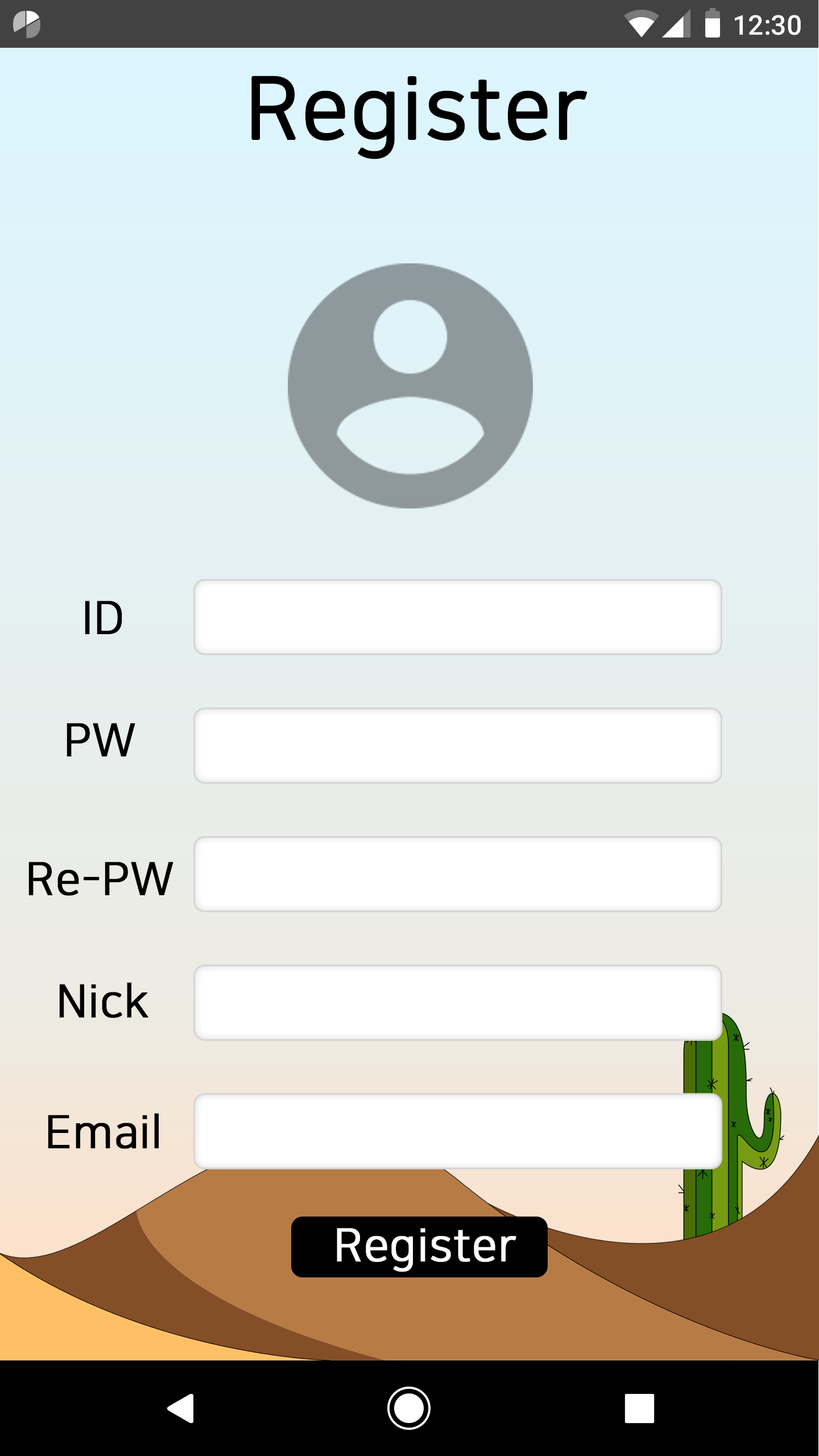
<style>
.page{position:relative;width:819px;height:1456px}
.page>*{position:absolute;margin:0}
.t1{font:27.3px "Roboto-Medium";color:#ffffff}
.t2{font:85.3px "NanumSquareOTFR";color:#000000;font-weight:bold}
.t3{font:45.5px "NanumSquareOTFR";color:#000000;font-weight:bold}
.t4{font:45.5px "NanumSquareOTFR";color:#ffffff;font-weight:bold}
</style>
<div class="page">
<p class="t1" style="left:735px;top:15px;width:66px;height:20px">12:30</p>
<p class="t2" style="left:251px;top:76px;width:337px;height:83px">Register</p>
<p class="t3" style="left:85px;top:601px;width:37px;height:33px">ID</p>
<p class="t3" style="left:67px;top:723px;width:68px;height:33px">PW</p>
<p class="t3" style="left:28px;top:862px;width:145px;height:34px">Re-PW</p>
<p class="t3" style="left:59px;top:982px;width:89px;height:36px">Nick</p>
<p class="t3" style="left:48px;top:1113px;width:111px;height:36px">Email</p>
<p class="t4" style="left:337px;top:1228px;width:179px;height:44px">Register</p>
</div>
